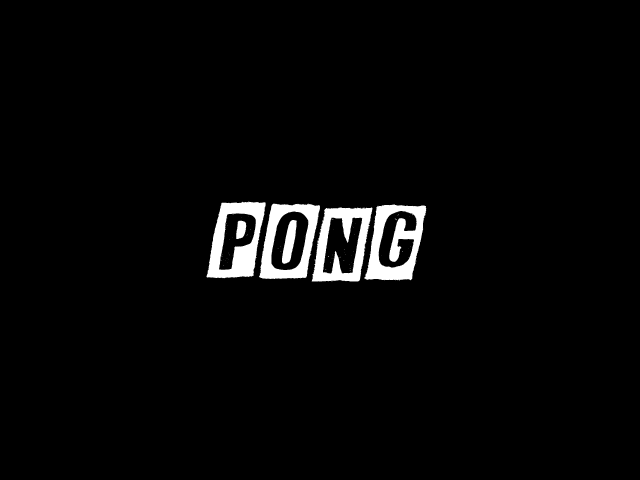
<style>
.page{position:relative;width:640px;height:480px;background:#000000}
.page>*{position:absolute;margin:0}
.t1{font:72px "WhiteOnBlack";letter-spacing:0.1em;color:#ffffff;font-style:italic}
</style>
<div class="page">
<p class="t1" style="left:206px;top:201px;width:221px;height:81px">Pong</p>
</div>
